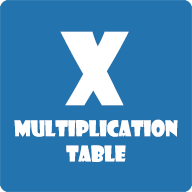
<style>
.page{position:relative;width:192px;height:192px;background:#2374ae}
.page>*{position:absolute;margin:0}
.t1{font:97.7px "ShowcardGothic-Reg";color:#ffffff;scale:0.96 1}
.t2{font:21.1px "ShowcardGothic-Reg";color:#ffffff;scale:0.95 1}
</style>
<div class="page">
<p class="t1" style="left:60px;top:31px;width:69px;height:75px">x</p>
<p class="t2" style="left:14px;top:119px;width:164px;height:43px;text-align:center">Multiplication<br>Table</p>
</div>
